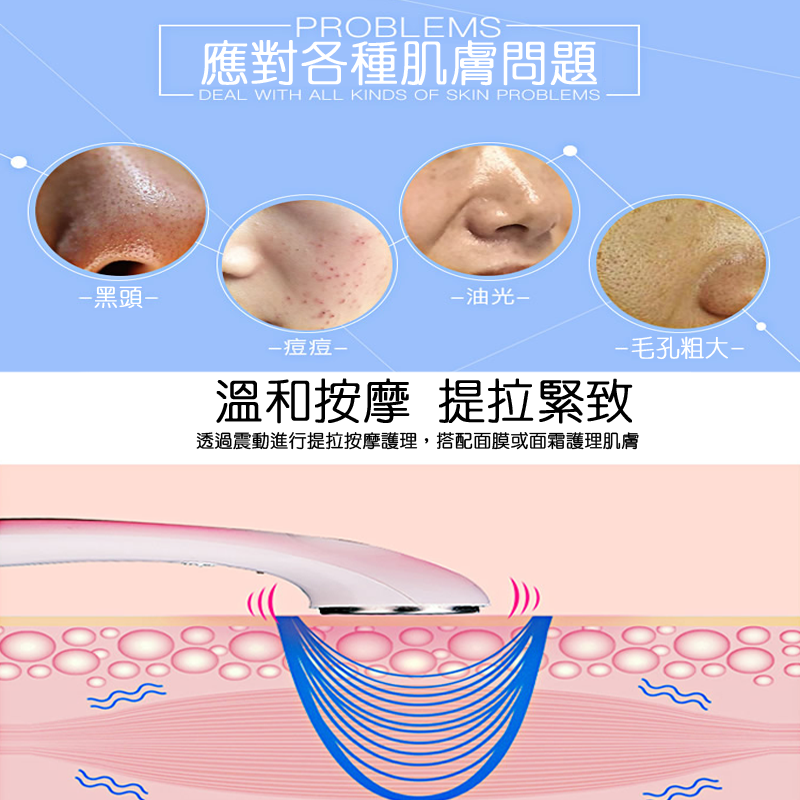
<style>
.page{position:relative;width:800px;height:800px;background:#9cc0fc}
.page>*{position:absolute;margin:0}
.t1{font:48.6px "HanWangYenLight";color:#ffffff;font-weight:bold}
.t2{font:24px "HanWangYenLight";color:#ffffff;font-weight:bold}
.t3{font:48px "HanWangYenLight";color:#000000;font-weight:bold}
.t4{font:18px "HanWangYenLight";color:#000000;font-weight:bold}
</style>
<div class="page">
<p class="t1" style="left:201px;top:40px;width:396px;height:46px">應對各種肌膚問題</p>
<p class="t2" style="left:94px;top:286px;width:49px;height:23px">黑頭</p>
<p class="t2" style="left:631px;top:336px;width:97px;height:24px">毛孔粗大</p>
<p class="t3" style="left:216px;top:378px;width:417px;height:46px">溫和按摩 提拉緊致</p>
<p class="t4" style="left:196px;top:432px;width:443px;height:18px">透過震動進行提拉按摩護理，搭配面膜或面霜護理肌膚</p>
</div>
